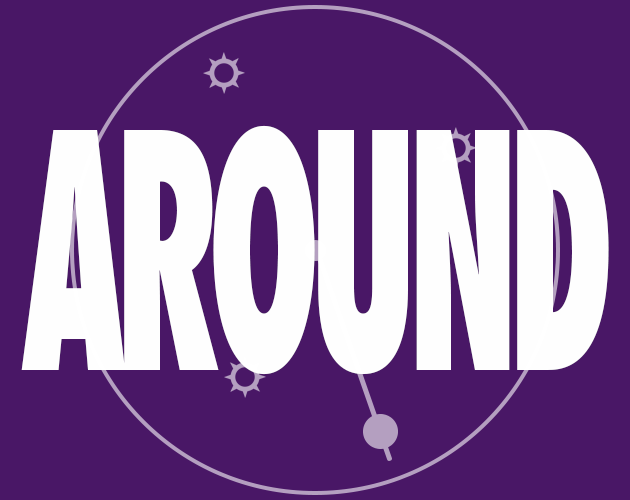
<style>
.page{position:relative;width:630px;height:500px;background:#491766}
.page>*{position:absolute;margin:0}
.t1{font:317.8px "FuturaStd-CondensedExtraBd";letter-spacing:-0.07em;color:#fefefe;scale:0.55 1}
</style>
<div class="page">
<p class="t1" style="left:21px;top:125px;width:588px;height:250px">AROUND</p>
</div>
